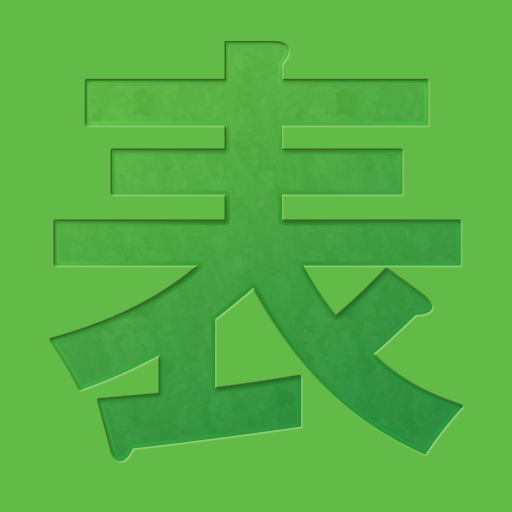
<style>
.page{position:relative;width:512px;height:512px;background:#62bb47}
.page>*{position:absolute;margin:0}
.t1{font:456px "AdobeGothicStd-Bold";color:#44a142}
</style>
<div class="page">
<p class="t1" style="left:50px;top:42px;width:413px;height:420px">表</p>
<p class="t1" style="left:50px;top:42px;width:413px;height:420px">表</p>
</div>
